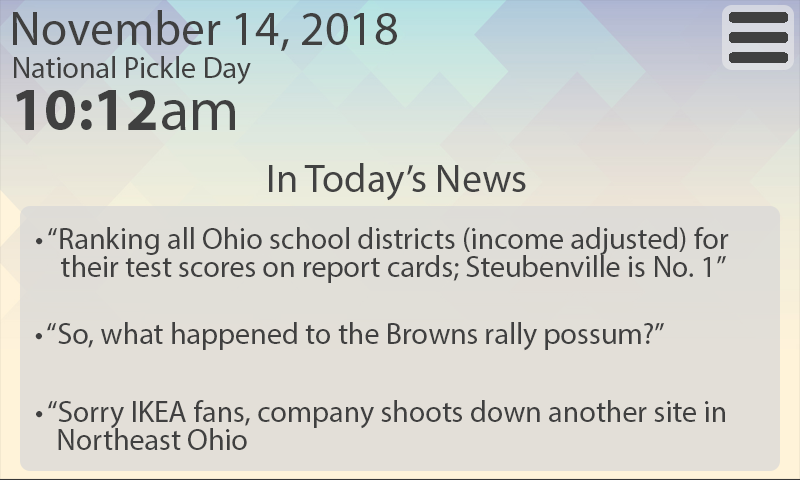
<style>
.page{position:relative;width:800px;height:480px;background:#e3dfd8}
.page>*{position:absolute;margin:0}
.t1{font:48px "MyriadPro-Regular";color:#404040}
.t2{font:30px "MyriadPro-Regular";color:#404040}
.t3{font:60px "MyriadPro-Bold";color:#404040}
.t4{font:60px "MyriadPro-Regular";color:#404040}
.t5{font:40px "MyriadPro-Regular";color:#424242}
.t6{font:30px/28px "MyriadPro-Regular";color:#404040}
</style>
<div class="page">
<p class="t1" style="left:13px;top:10px;width:384px;height:41px">November 14, 2018</p>
<p class="t2" style="left:14px;top:56px;width:237px;height:29px">National Pickle Day</p>
<p class="t3" style="left:16px;top:90px;width:219px;height:40px">10:12<span class="t4">am</span></p>
<p class="t5" style="left:269px;top:163px;width:257px;height:38px">In Today’s News</p>
<p class="t6" style="left:36px;top:227px;width:693px;height:56px">• “Ranking all Ohio school districts (income adjusted) for <br>    their test scores on report cards; Steubenville is No. 1”</p>
<p class="t2" style="left:35px;top:322px;width:629px;height:29px">• “So, what happened to the Browns rally possum?”</p>
<p class="t6" style="left:36px;top:400px;width:689px;height:50px">• “Sorry IKEA fans, company shoots down another site in <br>    Northeast Ohio</p>
</div>
